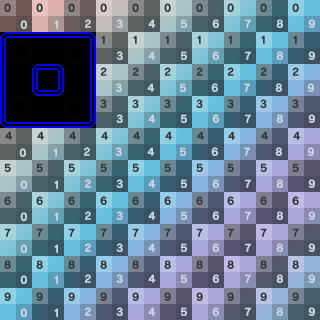
<style>
.page{position:relative;width:320px;height:320px}
.page>*{position:absolute;margin:0}
.t1{font:10px "RodinBokutohPro-B";letter-spacing:0.05em;color:#31373c;font-weight:bold}
.t2{font:10px "RodinBokutohPro-B";letter-spacing:0.05em;color:#c7d6e3;font-weight:bold}
</style>
<div class="page">
<p class="t1" style="left:4px;top:3px;width:7px;height:9px">0</p>
<p class="t1" style="left:36px;top:3px;width:7px;height:9px">0</p>
<p class="t1" style="left:68px;top:3px;width:7px;height:9px">0</p>
<p class="t1" style="left:100px;top:3px;width:7px;height:9px">0</p>
<p class="t1" style="left:132px;top:3px;width:7px;height:9px">0</p>
<p class="t1" style="left:164px;top:3px;width:7px;height:9px">0</p>
<p class="t1" style="left:196px;top:3px;width:7px;height:9px">0</p>
<p class="t1" style="left:227px;top:3px;width:7px;height:9px">0</p>
<p class="t1" style="left:260px;top:3px;width:7px;height:9px">0</p>
<p class="t1" style="left:292px;top:3px;width:7px;height:9px">0</p>
<p class="t2" style="left:20px;top:20px;width:7px;height:9px">0</p>
<p class="t2" style="left:54px;top:20px;width:4px;height:9px">1</p>
<p class="t2" style="left:85px;top:19px;width:6px;height:9px">2</p>
<p class="t2" style="left:116px;top:19px;width:7px;height:9px">3</p>
<p class="t2" style="left:148px;top:19px;width:8px;height:9px">4</p>
<p class="t2" style="left:180px;top:19px;width:7px;height:9px">5</p>
<p class="t2" style="left:212px;top:19px;width:7px;height:9px">6</p>
<p class="t2" style="left:245px;top:19px;width:6px;height:9px">7</p>
<p class="t2" style="left:276px;top:19px;width:7px;height:9px">8</p>
<p class="t2" style="left:308px;top:19px;width:7px;height:9px">9</p>
<p class="t1" style="left:101px;top:35px;width:4px;height:9px">1</p>
<p class="t1" style="left:133px;top:35px;width:4px;height:9px">1</p>
<p class="t1" style="left:165px;top:35px;width:4px;height:9px">1</p>
<p class="t1" style="left:197px;top:35px;width:4px;height:9px">1</p>
<p class="t1" style="left:228px;top:35px;width:4px;height:9px">1</p>
<p class="t1" style="left:261px;top:35px;width:4px;height:9px">1</p>
<p class="t1" style="left:293px;top:35px;width:4px;height:9px">1</p>
<p class="t2" style="left:116px;top:51px;width:7px;height:9px">3</p>
<p class="t2" style="left:148px;top:51px;width:8px;height:9px">4</p>
<p class="t2" style="left:180px;top:51px;width:7px;height:9px">5</p>
<p class="t2" style="left:212px;top:51px;width:7px;height:9px">6</p>
<p class="t2" style="left:245px;top:51px;width:6px;height:9px">7</p>
<p class="t2" style="left:276px;top:51px;width:7px;height:9px">8</p>
<p class="t2" style="left:308px;top:51px;width:7px;height:9px">9</p>
<p class="t1" style="left:100px;top:67px;width:7px;height:9px">2</p>
<p class="t1" style="left:132px;top:67px;width:7px;height:9px">2</p>
<p class="t1" style="left:164px;top:67px;width:7px;height:9px">2</p>
<p class="t1" style="left:196px;top:67px;width:7px;height:9px">2</p>
<p class="t1" style="left:227px;top:67px;width:7px;height:9px">2</p>
<p class="t1" style="left:260px;top:67px;width:7px;height:9px">2</p>
<p class="t1" style="left:292px;top:67px;width:7px;height:9px">2</p>
<p class="t2" style="left:115px;top:83px;width:7px;height:9px">3</p>
<p class="t2" style="left:147px;top:83px;width:8px;height:9px">4</p>
<p class="t2" style="left:179px;top:83px;width:7px;height:9px">5</p>
<p class="t2" style="left:211px;top:83px;width:7px;height:9px">6</p>
<p class="t2" style="left:244px;top:83px;width:6px;height:9px">7</p>
<p class="t2" style="left:275px;top:83px;width:7px;height:9px">8</p>
<p class="t2" style="left:307px;top:83px;width:7px;height:9px">9</p>
<p class="t1" style="left:100px;top:99px;width:7px;height:9px">3</p>
<p class="t1" style="left:132px;top:99px;width:7px;height:9px">3</p>
<p class="t1" style="left:164px;top:99px;width:7px;height:9px">3</p>
<p class="t1" style="left:196px;top:99px;width:7px;height:9px">3</p>
<p class="t1" style="left:227px;top:99px;width:7px;height:9px">3</p>
<p class="t1" style="left:260px;top:99px;width:7px;height:9px">3</p>
<p class="t1" style="left:292px;top:99px;width:7px;height:9px">3</p>
<p class="t2" style="left:116px;top:114px;width:7px;height:9px">3</p>
<p class="t2" style="left:148px;top:114px;width:8px;height:9px">4</p>
<p class="t2" style="left:180px;top:114px;width:7px;height:9px">5</p>
<p class="t2" style="left:212px;top:114px;width:7px;height:9px">6</p>
<p class="t2" style="left:245px;top:114px;width:6px;height:9px">7</p>
<p class="t2" style="left:276px;top:114px;width:7px;height:9px">8</p>
<p class="t2" style="left:308px;top:114px;width:7px;height:9px">9</p>
<p class="t1" style="left:5px;top:131px;width:7px;height:9px">4</p>
<p class="t1" style="left:37px;top:131px;width:7px;height:9px">4</p>
<p class="t1" style="left:69px;top:131px;width:7px;height:9px">4</p>
<p class="t1" style="left:101px;top:131px;width:7px;height:9px">4</p>
<p class="t1" style="left:133px;top:131px;width:7px;height:9px">4</p>
<p class="t1" style="left:165px;top:131px;width:7px;height:9px">4</p>
<p class="t1" style="left:197px;top:131px;width:7px;height:9px">4</p>
<p class="t1" style="left:228px;top:131px;width:7px;height:9px">4</p>
<p class="t1" style="left:261px;top:131px;width:7px;height:9px">4</p>
<p class="t1" style="left:293px;top:131px;width:7px;height:9px">4</p>
<p class="t2" style="left:19px;top:148px;width:7px;height:9px">0</p>
<p class="t2" style="left:53px;top:148px;width:4px;height:9px">1</p>
<p class="t2" style="left:84px;top:147px;width:6px;height:9px">2</p>
<p class="t2" style="left:115px;top:147px;width:7px;height:9px">3</p>
<p class="t2" style="left:147px;top:147px;width:8px;height:9px">4</p>
<p class="t2" style="left:179px;top:147px;width:7px;height:9px">5</p>
<p class="t2" style="left:211px;top:147px;width:7px;height:9px">6</p>
<p class="t2" style="left:244px;top:147px;width:6px;height:9px">7</p>
<p class="t2" style="left:275px;top:147px;width:7px;height:9px">8</p>
<p class="t2" style="left:307px;top:147px;width:7px;height:9px">9</p>
<p class="t1" style="left:4px;top:163px;width:7px;height:9px">5</p>
<p class="t1" style="left:36px;top:163px;width:7px;height:9px">5</p>
<p class="t1" style="left:68px;top:163px;width:7px;height:9px">5</p>
<p class="t1" style="left:100px;top:163px;width:7px;height:9px">5</p>
<p class="t1" style="left:132px;top:163px;width:7px;height:9px">5</p>
<p class="t1" style="left:164px;top:163px;width:7px;height:9px">5</p>
<p class="t1" style="left:196px;top:163px;width:7px;height:9px">5</p>
<p class="t1" style="left:227px;top:163px;width:7px;height:9px">5</p>
<p class="t1" style="left:260px;top:163px;width:7px;height:9px">5</p>
<p class="t1" style="left:292px;top:163px;width:7px;height:9px">5</p>
<p class="t2" style="left:20px;top:180px;width:7px;height:9px">0</p>
<p class="t2" style="left:54px;top:180px;width:4px;height:9px">1</p>
<p class="t2" style="left:85px;top:179px;width:6px;height:9px">2</p>
<p class="t2" style="left:116px;top:179px;width:7px;height:9px">3</p>
<p class="t2" style="left:148px;top:179px;width:8px;height:9px">4</p>
<p class="t2" style="left:180px;top:179px;width:7px;height:9px">5</p>
<p class="t2" style="left:212px;top:179px;width:7px;height:9px">6</p>
<p class="t2" style="left:245px;top:179px;width:6px;height:9px">7</p>
<p class="t2" style="left:276px;top:179px;width:7px;height:9px">8</p>
<p class="t2" style="left:308px;top:179px;width:7px;height:9px">9</p>
<p class="t1" style="left:4px;top:196px;width:7px;height:9px">6</p>
<p class="t1" style="left:36px;top:196px;width:7px;height:9px">6</p>
<p class="t1" style="left:68px;top:196px;width:7px;height:9px">6</p>
<p class="t1" style="left:100px;top:196px;width:7px;height:9px">6</p>
<p class="t1" style="left:132px;top:196px;width:7px;height:9px">6</p>
<p class="t1" style="left:164px;top:196px;width:7px;height:9px">6</p>
<p class="t1" style="left:196px;top:196px;width:7px;height:9px">6</p>
<p class="t1" style="left:227px;top:196px;width:7px;height:9px">6</p>
<p class="t1" style="left:260px;top:196px;width:7px;height:9px">6</p>
<p class="t1" style="left:292px;top:196px;width:7px;height:9px">6</p>
<p class="t2" style="left:20px;top:212px;width:7px;height:9px">0</p>
<p class="t2" style="left:54px;top:212px;width:4px;height:9px">1</p>
<p class="t2" style="left:85px;top:211px;width:6px;height:9px">2</p>
<p class="t2" style="left:116px;top:211px;width:7px;height:9px">3</p>
<p class="t2" style="left:148px;top:211px;width:8px;height:9px">4</p>
<p class="t2" style="left:180px;top:211px;width:7px;height:9px">5</p>
<p class="t2" style="left:212px;top:211px;width:7px;height:9px">6</p>
<p class="t2" style="left:245px;top:211px;width:6px;height:9px">7</p>
<p class="t2" style="left:276px;top:211px;width:7px;height:9px">8</p>
<p class="t2" style="left:308px;top:211px;width:7px;height:9px">9</p>
<p class="t1" style="left:4px;top:228px;width:7px;height:9px">7</p>
<p class="t1" style="left:36px;top:228px;width:7px;height:9px">7</p>
<p class="t1" style="left:68px;top:228px;width:7px;height:9px">7</p>
<p class="t1" style="left:100px;top:228px;width:7px;height:9px">7</p>
<p class="t1" style="left:132px;top:228px;width:7px;height:9px">7</p>
<p class="t1" style="left:164px;top:228px;width:7px;height:9px">7</p>
<p class="t1" style="left:196px;top:228px;width:7px;height:9px">7</p>
<p class="t1" style="left:227px;top:228px;width:7px;height:9px">7</p>
<p class="t1" style="left:260px;top:228px;width:7px;height:9px">7</p>
<p class="t1" style="left:292px;top:228px;width:7px;height:9px">7</p>
<p class="t2" style="left:20px;top:244px;width:7px;height:9px">0</p>
<p class="t2" style="left:54px;top:244px;width:4px;height:9px">1</p>
<p class="t2" style="left:85px;top:243px;width:6px;height:9px">2</p>
<p class="t2" style="left:116px;top:243px;width:7px;height:9px">3</p>
<p class="t2" style="left:148px;top:243px;width:8px;height:9px">4</p>
<p class="t2" style="left:180px;top:243px;width:7px;height:9px">5</p>
<p class="t2" style="left:212px;top:243px;width:7px;height:9px">6</p>
<p class="t2" style="left:245px;top:243px;width:6px;height:9px">7</p>
<p class="t2" style="left:276px;top:243px;width:7px;height:9px">8</p>
<p class="t2" style="left:308px;top:243px;width:7px;height:9px">9</p>
<p class="t1" style="left:4px;top:260px;width:7px;height:9px">8</p>
<p class="t1" style="left:36px;top:260px;width:7px;height:9px">8</p>
<p class="t1" style="left:68px;top:260px;width:7px;height:9px">8</p>
<p class="t1" style="left:100px;top:260px;width:7px;height:9px">8</p>
<p class="t1" style="left:132px;top:260px;width:7px;height:9px">8</p>
<p class="t1" style="left:164px;top:260px;width:7px;height:9px">8</p>
<p class="t1" style="left:196px;top:260px;width:7px;height:9px">8</p>
<p class="t1" style="left:227px;top:260px;width:7px;height:9px">8</p>
<p class="t1" style="left:260px;top:260px;width:7px;height:9px">8</p>
<p class="t1" style="left:292px;top:260px;width:7px;height:9px">8</p>
<p class="t2" style="left:20px;top:275px;width:7px;height:9px">0</p>
<p class="t2" style="left:54px;top:275px;width:4px;height:9px">1</p>
<p class="t2" style="left:85px;top:274px;width:6px;height:9px">2</p>
<p class="t2" style="left:116px;top:274px;width:7px;height:9px">3</p>
<p class="t2" style="left:148px;top:274px;width:8px;height:9px">4</p>
<p class="t2" style="left:180px;top:274px;width:7px;height:9px">5</p>
<p class="t2" style="left:212px;top:274px;width:7px;height:9px">6</p>
<p class="t2" style="left:245px;top:274px;width:6px;height:9px">7</p>
<p class="t2" style="left:276px;top:274px;width:7px;height:9px">8</p>
<p class="t2" style="left:308px;top:274px;width:7px;height:9px">9</p>
<p class="t1" style="left:4px;top:292px;width:7px;height:9px">9</p>
<p class="t1" style="left:36px;top:292px;width:7px;height:9px">9</p>
<p class="t1" style="left:68px;top:292px;width:7px;height:9px">9</p>
<p class="t1" style="left:100px;top:292px;width:7px;height:9px">9</p>
<p class="t1" style="left:132px;top:292px;width:7px;height:9px">9</p>
<p class="t1" style="left:164px;top:292px;width:7px;height:9px">9</p>
<p class="t1" style="left:196px;top:292px;width:7px;height:9px">9</p>
<p class="t1" style="left:227px;top:292px;width:7px;height:9px">9</p>
<p class="t1" style="left:260px;top:292px;width:7px;height:9px">9</p>
<p class="t1" style="left:292px;top:292px;width:7px;height:9px">9</p>
<p class="t2" style="left:20px;top:308px;width:7px;height:9px">0</p>
<p class="t2" style="left:54px;top:308px;width:4px;height:9px">1</p>
<p class="t2" style="left:85px;top:307px;width:6px;height:9px">2</p>
<p class="t2" style="left:116px;top:307px;width:7px;height:9px">3</p>
<p class="t2" style="left:148px;top:307px;width:8px;height:9px">4</p>
<p class="t2" style="left:180px;top:307px;width:7px;height:9px">5</p>
<p class="t2" style="left:212px;top:307px;width:7px;height:9px">6</p>
<p class="t2" style="left:245px;top:307px;width:6px;height:9px">7</p>
<p class="t2" style="left:276px;top:307px;width:7px;height:9px">8</p>
<p class="t2" style="left:308px;top:307px;width:7px;height:9px">9</p>
</div>
